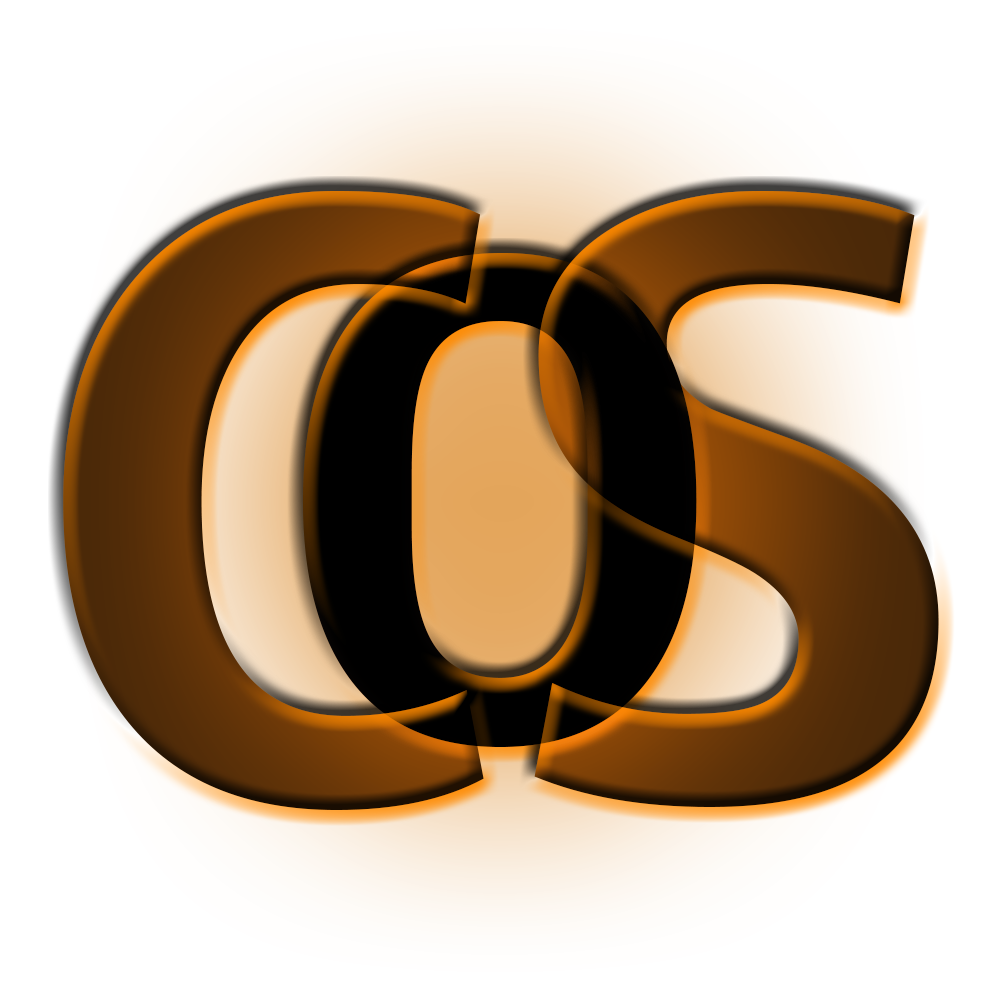
<style>
.page{position:relative;width:1000px;height:1000px;background:#ffffff}
.page>*{position:absolute;margin:0}
.t1{font:799.9px "CharcoalCY"}
.t2{font:640px "CharcoalCY";color:#070403}
</style>
<div class="page">
<p class="t1" style="left:63px;top:191px;width:876px;height:619px">CS</p>
<p class="t2" style="left:302px;top:253px;width:395px;height:494px">O</p>
</div>
